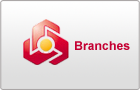
<style>
.page{position:relative;width:140px;height:90px}
.page>*{position:absolute;margin:0}
.t1{font:12.3px "Arial-BoldMT";color:#c40032}
</style>
<div class="page">
<p class="t1" style="left:75px;top:41px;width:55px;height:9px">Branches</p>
</div>
